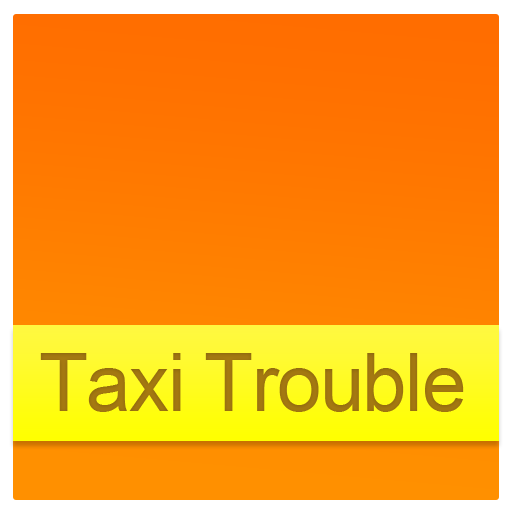
<style>
.page{position:relative;width:512px;height:512px}
.page>*{position:absolute;margin:0}
.t1{font:80px "ArialMT";letter-spacing:-0.02em;color:#a07610}
</style>
<div class="page">
<p class="t1" style="left:40px;top:353px;width:424px;height:59px">Taxi Trouble</p>
</div>
